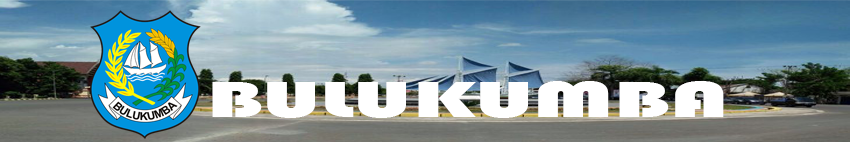
<style>
.page{position:relative;width:850px;height:142px}
.page>*{position:absolute;margin:0}
.t1{font:51.6px "Bauhaus93";color:#ffffff;scale:1.91 1}
</style>
<div class="page">
<p class="t1" style="left:212px;top:81px;width:512px;height:37px">BULUKUMBA</p>
</div>
